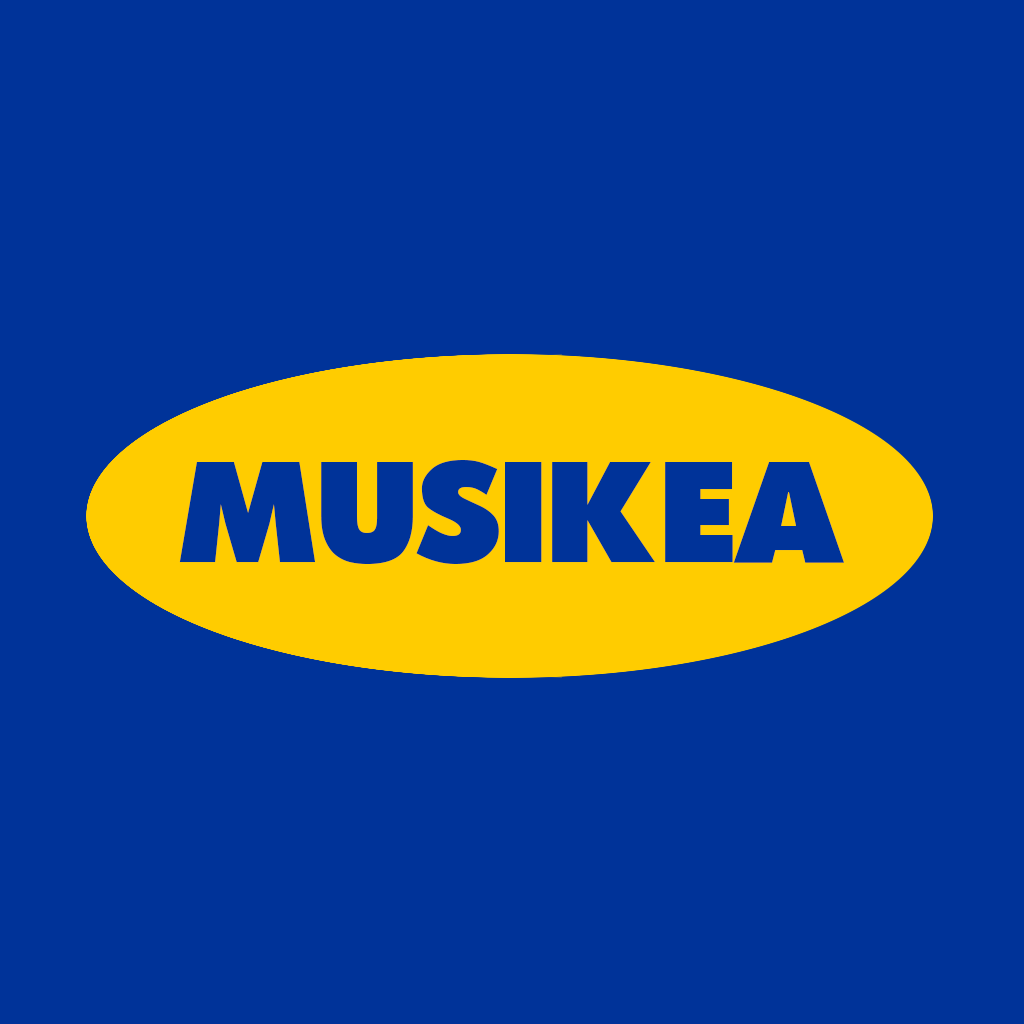
<style>
.page{position:relative;width:1024px;height:1024px;background:#003399}
.page>*{position:absolute;margin:0}
.t1{font:154px "FuturaPressPress";color:#003399}
</style>
<div class="page">
<p class="t1" style="left:179px;top:460px;width:665px;height:104px">MUSIKEA</p>
</div>
